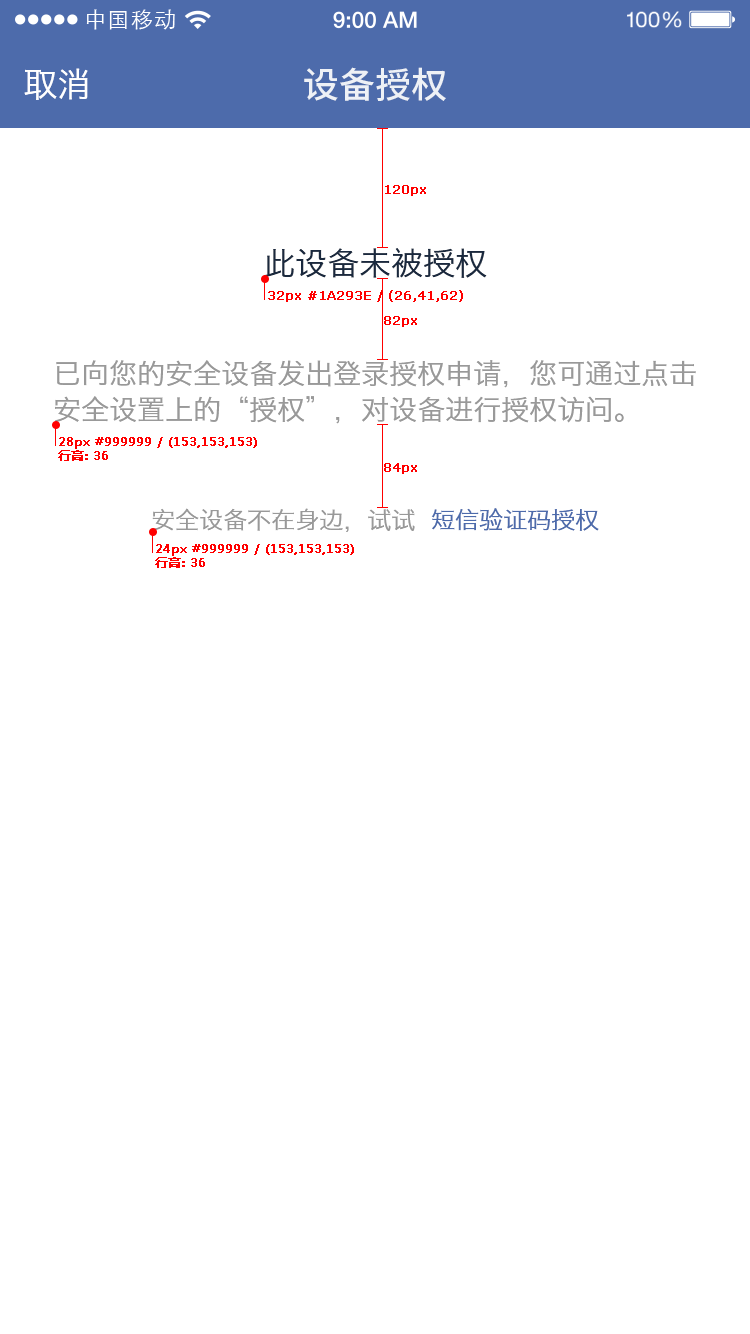
<style>
.page{position:relative;width:750px;height:1334px;background:#ffffff}
.page>*{position:absolute;margin:0}
.t1{font:21.9px "STXihei";letter-spacing:0.04em;color:#ffffff}
.t2{font:34px "HiraginoSansGB-W3";color:#ffffff}
.t3{font:36px "NotoSansHans-Medium";color:#eef1f6}
.t4{font:12px "Verdana";color:#ff0000;font-weight:bold}
.t5{font:32px "HiraginoSansGB-W3";color:#1a293e}
.t6{font:28px/36px "HiraginoSansGB-W3";color:#999999}
.t7{font:12px "MicrosoftYaHei";color:#ff0000;font-weight:bold}
.t8{font:24px "HiraginoSansGB-W3";color:#999999}
.t9{font:24px "HiraginoSansGB-W3";color:#4d6bab}
</style>
<div class="page">
<p class="t1" style="left:86px;top:9px;width:89px;height:21px">中国移动</p>
<p class="t2" style="left:24px;top:68px;width:64px;height:32px">取消</p>
<p class="t3" style="left:304px;top:67px;width:142px;height:34px">设备授权</p>
<p class="t4" style="left:385px;top:185px;width:41px;height:11px">120px</p>
<p class="t5" style="left:264px;top:248px;width:223px;height:30px">此设备未被授权</p>
<p class="t4" style="left:268px;top:290px;width:195px;height:12px">32px #1A293E / (26,41,62)</p>
<p class="t4" style="left:384px;top:316px;width:33px;height:11px">82px</p>
<p class="t6" style="left:55px;top:360px;width:641px;height:64px">已向您的安全设备发出登录授权申请，您可通过点击<br>安全设置上的“授权”，对设备进行授权访问。</p>
<p class="t7" style="left:58px;top:437px;width:199px;height:24px">28px #999999 / (153,153,153)<br>行高: 36</p>
<p class="t4" style="left:384px;top:463px;width:33px;height:11px">84px</p>
<p class="t8" style="left:152px;top:508px;width:447px;height:24px">安全设备不在身边，试试  <span class="t9">短信验证码授权</span></p>
<p class="t7" style="left:155px;top:544px;width:199px;height:24px">24px #999999 / (153,153,153)<br>行高: 36</p>
</div>
